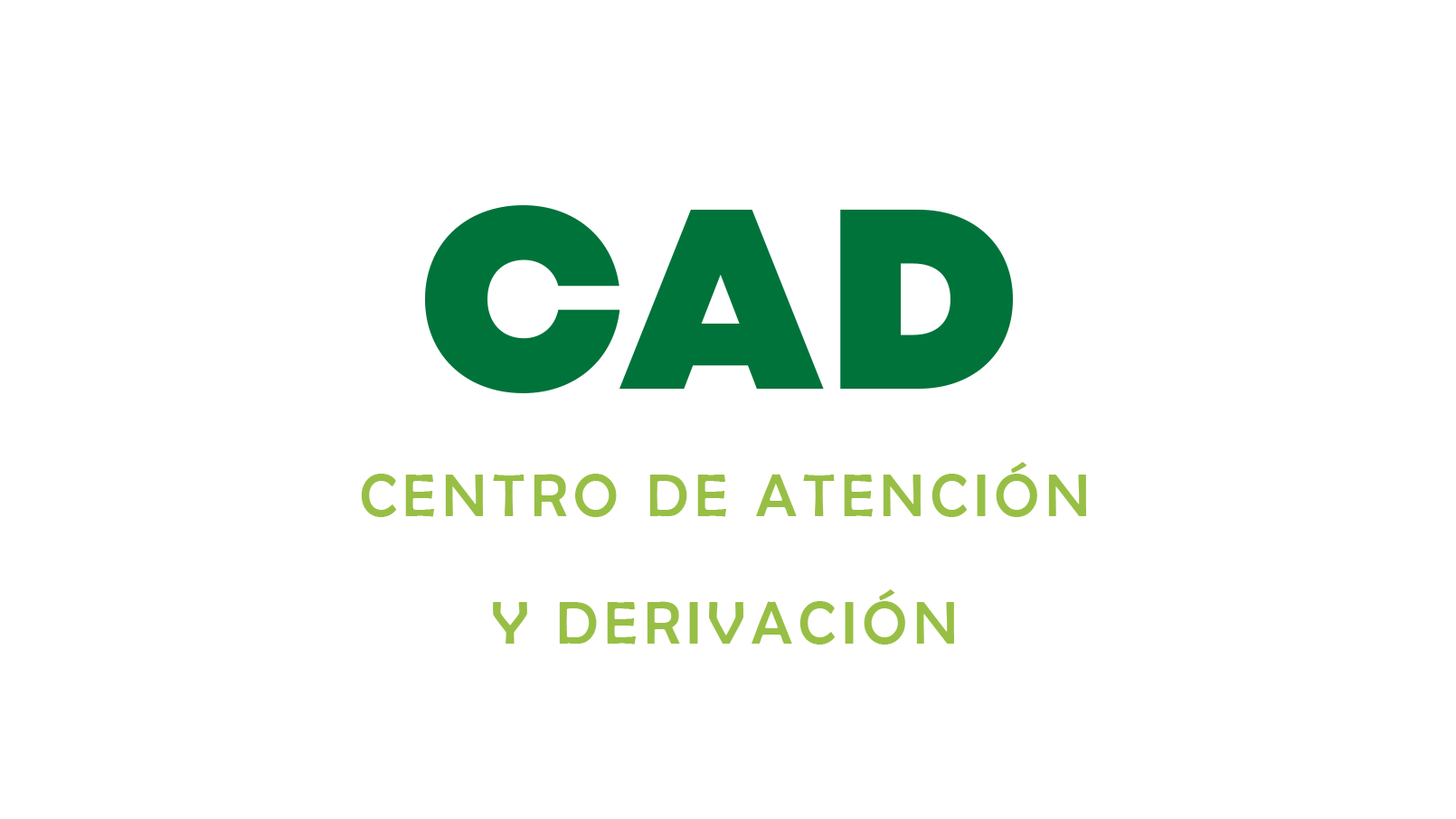
<style>
.page{position:relative;width:1456px;height:819px;background:#ffffff}
.page>*{position:absolute;margin:0}
.t1{font:60.7px/127.5px "BerlinSansFB-Reg";letter-spacing:0.1em;color:#98bf45}
.t2{font:255.9px/127.5px "MontBlanc-Trial-Black";letter-spacing:-0.02em;color:#00733a}
.t3{font:255.9px/127.5px "MontBlanc-Trial-Black";letter-spacing:0.02em;color:#00733a}
</style>
<div class="page">
<p class="t1" style="left:361px;top:205px;width:725px;height:440px;text-align:center"><span class="t2">C</span><span class="t3">AD<br></span>CENTRO DE ATENCIÓN<br>Y DERIVACIÓN</p>
</div>
